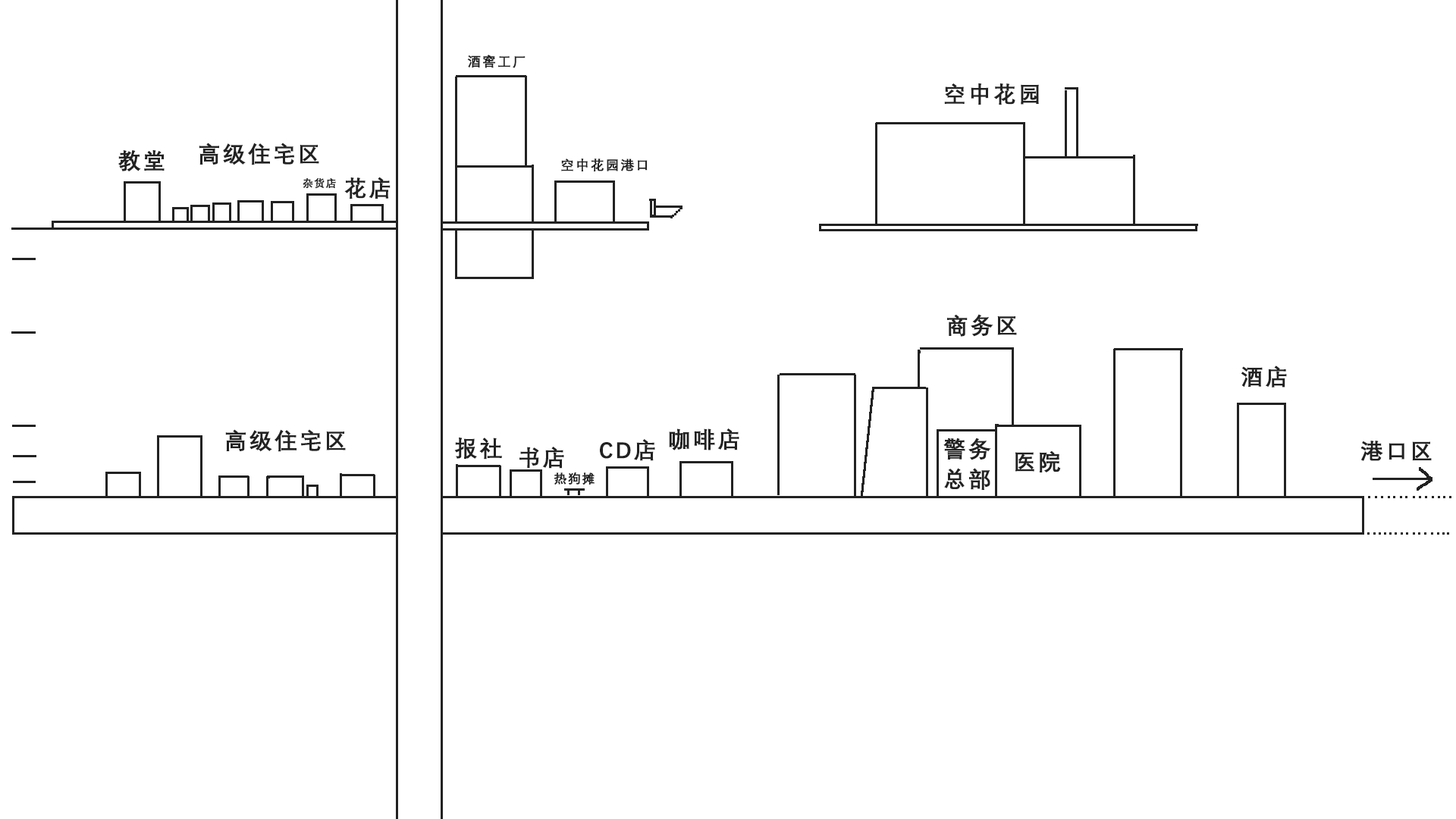
<style>
.page{position:relative;width:1456px;height:819px;background:#ffffff}
.page>*{position:absolute;margin:0}
.t1{font:13.6px "DengXian-Bold";letter-spacing:0.1em;color:#222222}
.t2{font:22.7px "DengXian-Bold";letter-spacing:0.1em;color:#222222}
.t3{font:10.6px "DengXian-Bold";letter-spacing:0.1em;color:#222222}
.t4{font:22.7px/7.5px "DengXian-Bold";letter-spacing:0.1em;color:#222222}
.t5{font:12.9px "DengXian-Bold";letter-spacing:0.1em;color:#222222}
</style>
<div class="page">
<p class="t1" style="left:467px;top:55px;width:59px;height:13px">酒窖工厂</p>
<p class="t2" style="left:944px;top:83px;width:95px;height:22px">空中花园</p>
<p class="t2" style="left:199px;top:143px;width:120px;height:22px">高级住宅区</p>
<p class="t2" style="left:118px;top:150px;width:47px;height:21px">教堂</p>
<p class="t1" style="left:561px;top:158px;width:87px;height:13px">空中花园港口</p>
<p class="t3" style="left:303px;top:177px;width:33px;height:12px">杂货店</p>
<p class="t2" style="left:344px;top:177px;width:47px;height:22px">花店</p>
<p class="t2" style="left:947px;top:314px;width:70px;height:23px">商务区</p>
<p class="t2" style="left:1241px;top:366px;width:46px;height:22px">酒店</p>
<p class="t2" style="left:225px;top:429px;width:121px;height:23px">高级住宅区</p>
<p class="t2" style="left:454px;top:438px;width:48px;height:22px">报社</p>
<p class="t2" style="left:669px;top:428px;width:70px;height:22px">咖啡店</p>
<p class="t4" style="left:943px;top:438px;width:48px;height:52px">警务<br><br><br><br>总部</p>
<p class="t2" style="left:519px;top:447px;width:45px;height:22px">书店</p>
<p class="t2" style="left:600px;top:439px;width:55px;height:22px">CD店</p>
<p class="t2" style="left:1360px;top:441px;width:72px;height:20px">港口区</p>
<p class="t2" style="left:1015px;top:450px;width:46px;height:22px">医院</p>
<p class="t5" style="left:554px;top:472px;width:41px;height:13px">热狗摊</p>
</div>
